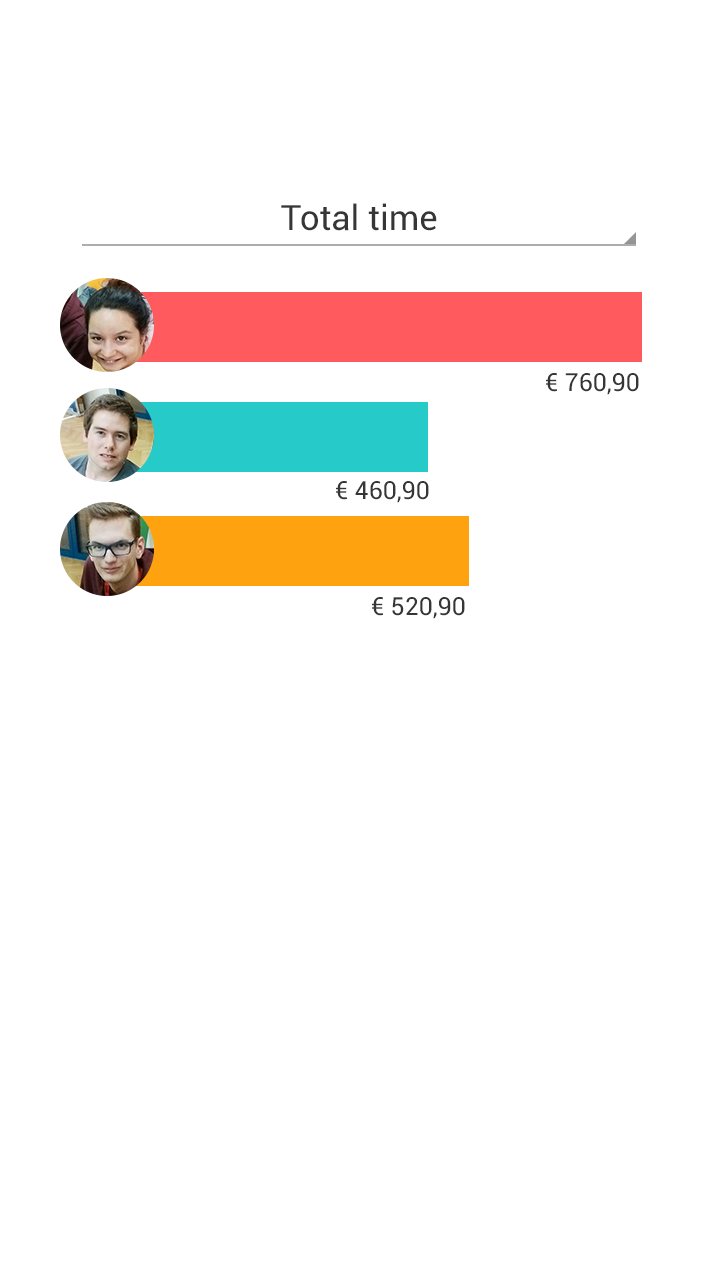
<style>
.page{position:relative;width:720px;height:1280px;background:#ffffff}
.page>*{position:absolute;margin:0}
.t1{font:35px "Roboto-Regular";color:#363636}
.t2{font:25px "Roboto-Regular";color:#363636}
</style>
<div class="page">
<p class="t1" style="left:281px;top:203px;width:156px;height:28px">Total time</p>
<p class="t2" style="left:546px;top:373px;width:93px;height:22px">€ 760,90</p>
<p class="t2" style="left:336px;top:481px;width:93px;height:22px">€ 460,90</p>
<p class="t2" style="left:372px;top:597px;width:93px;height:22px">€ 520,90</p>
</div>
